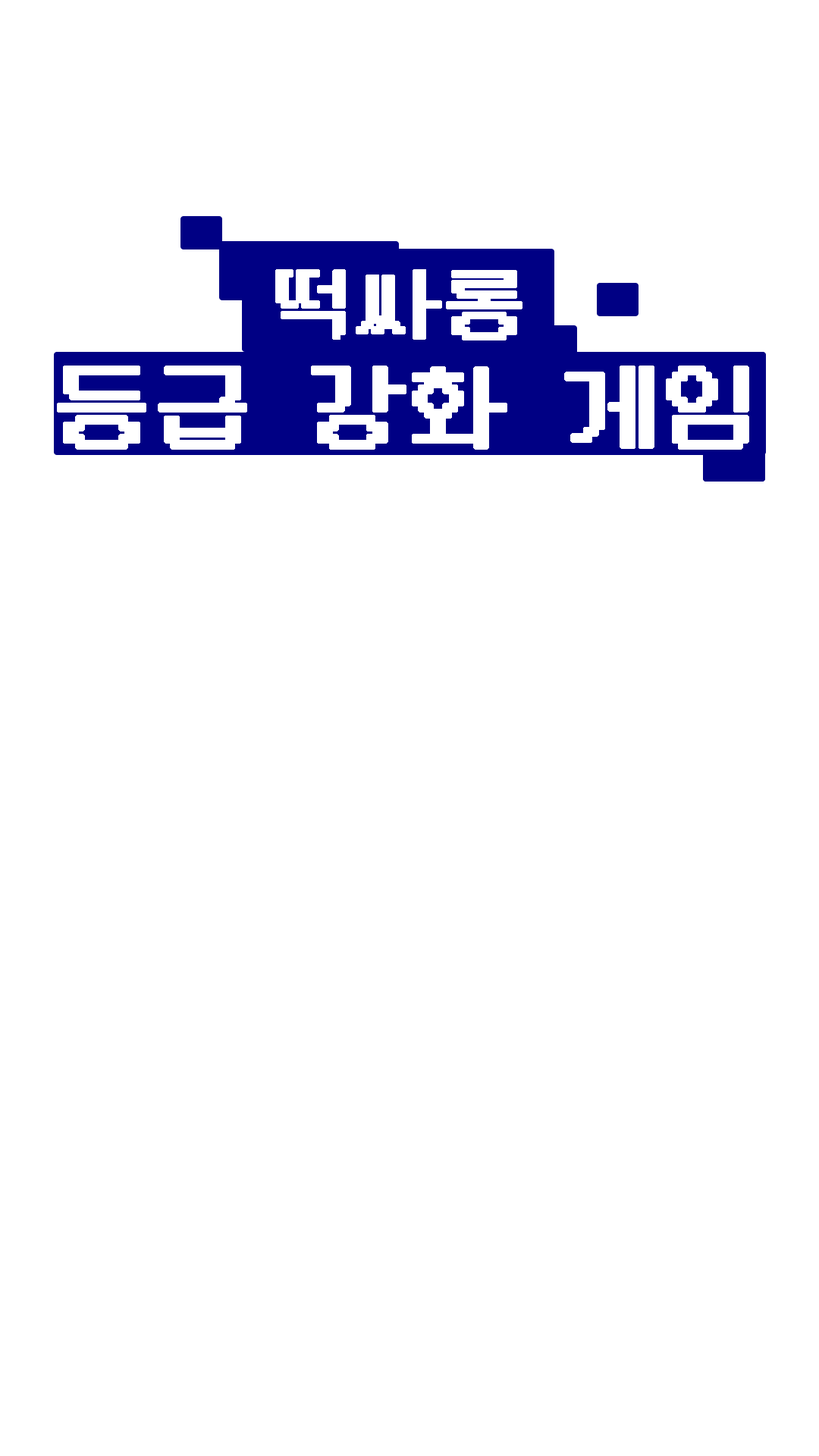
<style>
.page{position:relative;width:819px;height:1456px;background:#ffffff}
.page>*{position:absolute;margin:0}
.t1{font:83.4px "DungGeunMo";color:#ffffff;font-weight:bold}
.t2{font:98.6px "DungGeunMo";color:#ffffff;font-weight:bold}
</style>
<div class="page">
<p class="t1" style="left:275px;top:269px;width:247px;height:71px">떡싸롱</p>
<p class="t2" style="left:57px;top:366px;width:692px;height:84px">등급 강화 게임</p>
</div>
